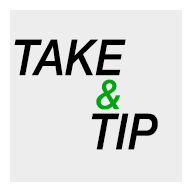
<style>
.page{position:relative;width:192px;height:192px;background:#ededed}
.page>*{position:absolute;margin:0}
.t1{font:50px "HelveticaNeue-MediumItalic";color:#000000;scale:0.89 1}
.t2{font:40px "HelveticaNeue-MediumItalic";color:#00a612}
</style>
<div class="page">
<p class="t1" style="left:14px;top:39px;width:112px;height:37px">TAKE</p>
<p class="t2" style="left:96px;top:79px;width:24px;height:31px">&amp;</p>
<p class="t1" style="left:91px;top:113px;width:67px;height:37px">TIP</p>
</div>
